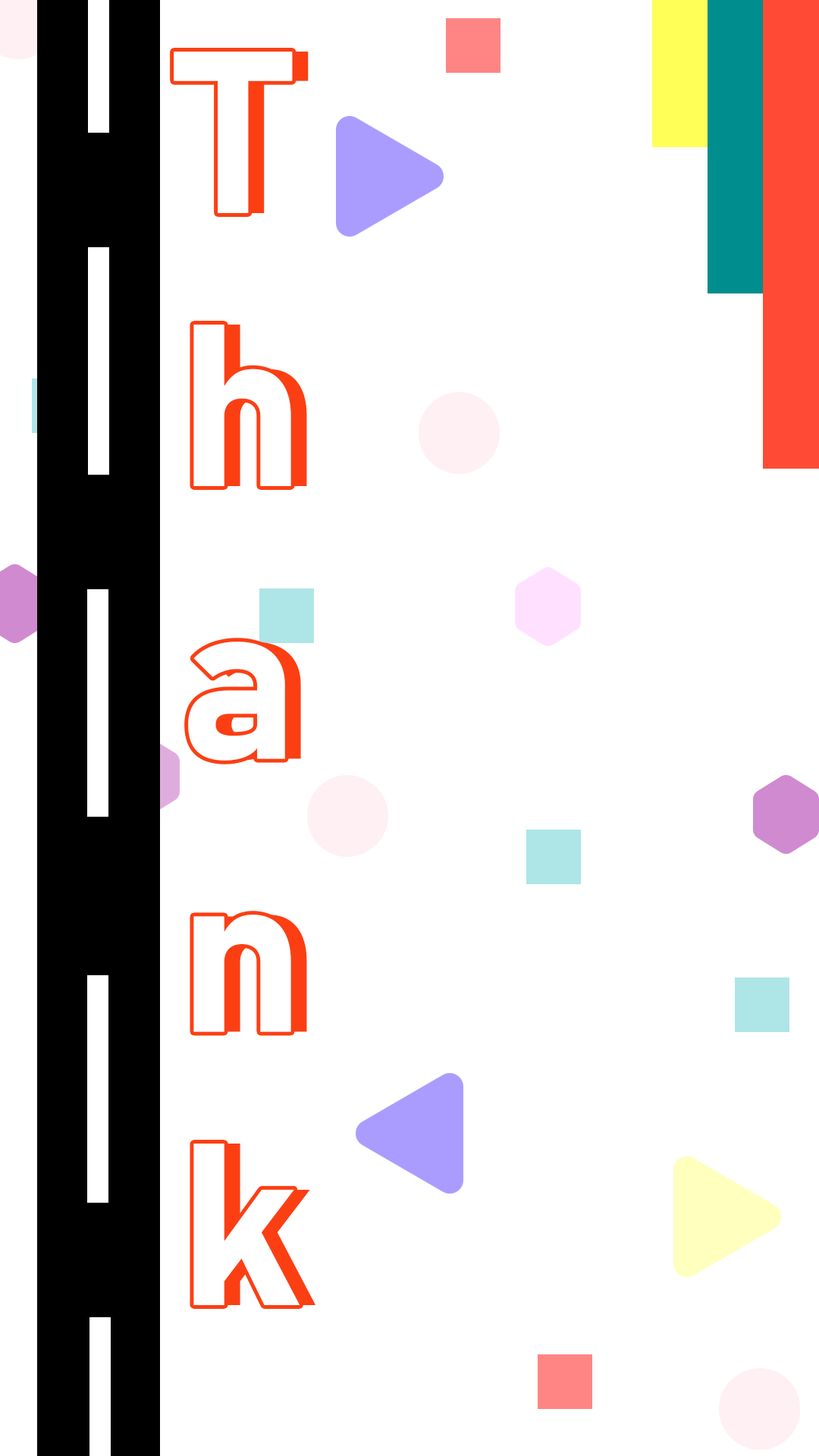
<style>
.page{position:relative;width:819px;height:1456px;background:#ffffff}
.page>*{position:absolute;margin:0}
.t1{font:227.5px "Bahnschrift-Bold";letter-spacing:0.01em}
</style>
<div class="page">
<p class="t1" style="left:190px;top:52px;width:126px;height:1253px">T<br>h<br>a<br>n<br>k</p>
</div>
